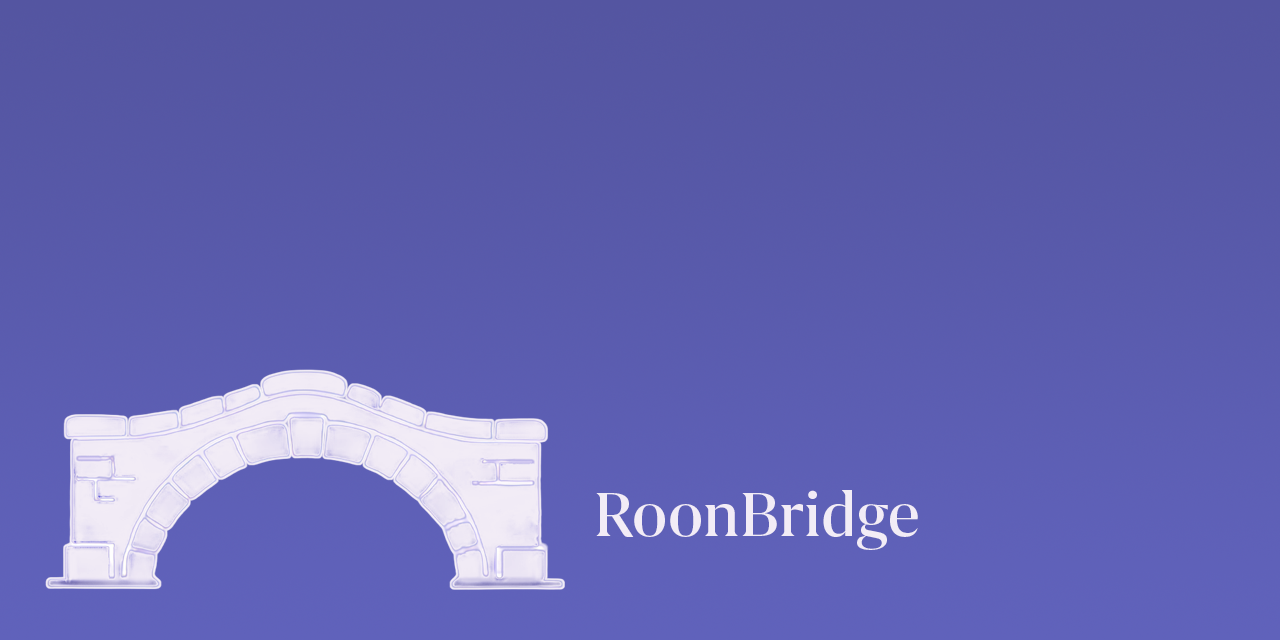
<style>
.page{position:relative;width:1280px;height:640px}
.page>*{position:absolute;margin:0}
.t1{font:72px "GrifoM-Medium";color:#f2ecf6}
</style>
<div class="page">
<p class="t1" style="left:596px;top:490px;width:322px;height:60px">RoonBridge</p>
</div>
